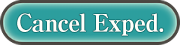
<style>
.page{position:relative;width:180px;height:45px}
.page>*{position:absolute;margin:0}
.t1{font:24px "RyuminPro-ExBold";letter-spacing:-0.04em;color:#fffffa}
</style>
<div class="page">
<p class="t1" style="left:17px;top:13px;width:147px;height:23px">Cancel Exped.</p>
</div>
